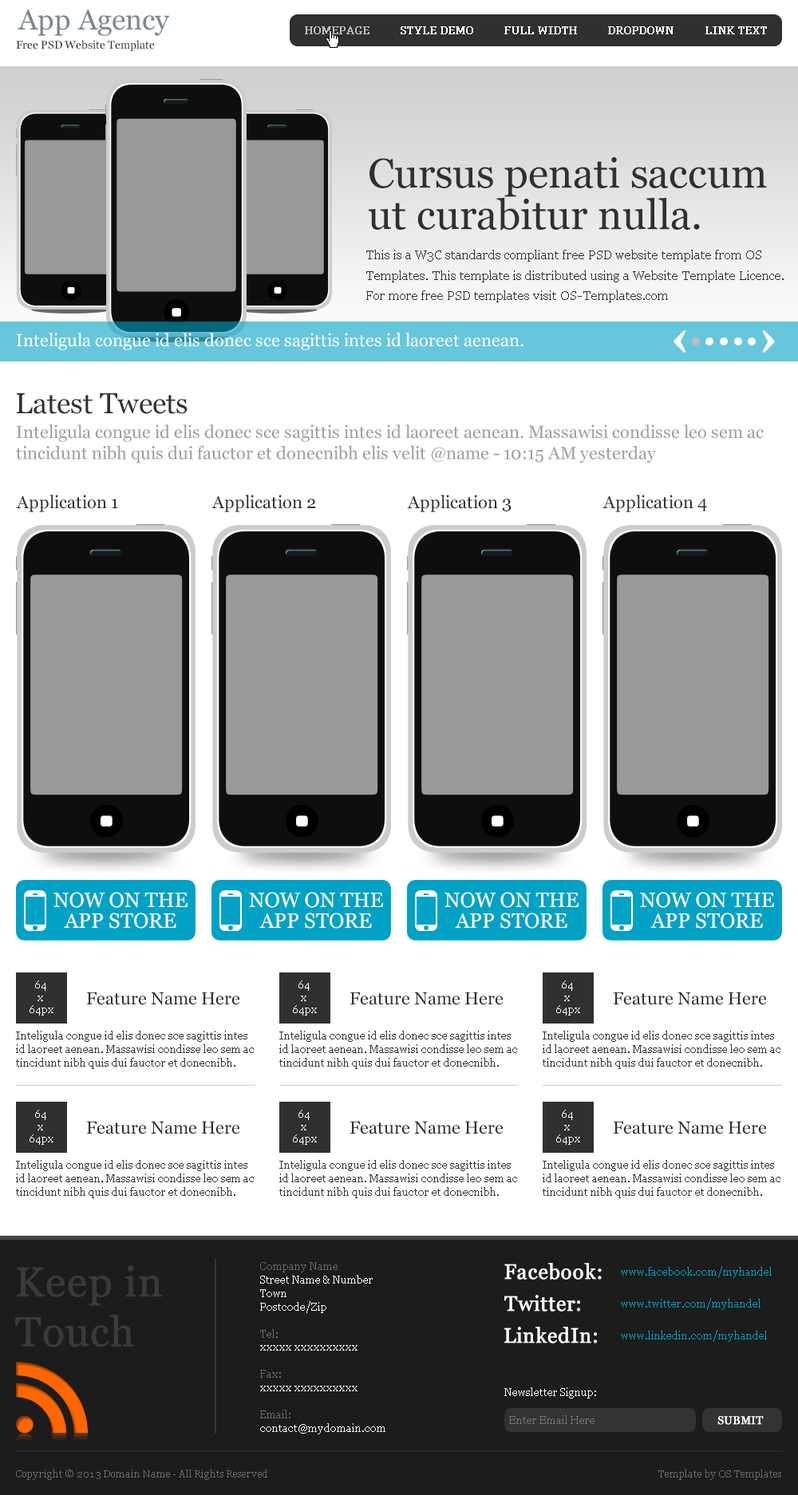
<style>
.page{position:relative;width:798px;height:1495px;background:#ffffff}
.page>*{position:absolute;margin:0}
.t1{font:28.7px "Georgia";color:#7a888d}
.t2{font:10.4px "Georgia";color:#bdbdbf;font-weight:bold}
.t3{font:10.4px "Georgia";color:#ffffff;font-weight:bold}
.t4{font:11.2px "Georgia";color:#303030}
.t5{font:41.5px/41.5px "Georgia";color:#303030}
.t6{font:12.8px/20.4px "Georgia";color:#303030}
.t7{font:17.5px "Georgia";color:#ffffff}
.t8{font:28.7px "Georgia";color:#303030}
.t9{font:17.5px/21.1px "Georgia";color:#9e9e9e}
.t10{font:17.5px "Georgia";color:#303030}
.t11{font:20.7px/20.7px "Georgia";color:#ffffff}
.t12{font:10.4px/12.4px "Georgia";color:#ffffff}
.t13{font:10.4px/13.5px "Georgia";color:#333333}
.t14{font:41.5px/49.8px "Georgia";color:#3a3a3a;font-weight:bold}
.t15{font:10.4px/13.5px "Georgia";color:#ffffff}
.t16{font:10.4px/13.5px "Georgia";color:#6b6b6b}
.t17{font:20.7px "Georgia";color:#ffffff;font-weight:bold}
.t18{font:10.4px "Georgia";color:#01a2c6}
.t19{font:10.4px "Georgia";color:#ffffff}
.t20{font:11.2px "Georgia";color:#747474}
.t21{font:11.2px "Georgia";color:#ffffff;text-transform:uppercase;font-weight:bold}
.t22{font:9.6px "Georgia";color:#6b6b6b}
</style>
<div class="page">
<p class="t1" style="left:18px;top:10px;width:152px;height:26px">App Agency</p>
<p class="t2" style="left:305px;top:26px;width:64px;height:8px">HOMEPAGE</p>
<p class="t3" style="left:400px;top:26px;width:73px;height:8px">STYLE DEMO</p>
<p class="t3" style="left:504px;top:26px;width:73px;height:8px">FULL WIDTH</p>
<p class="t3" style="left:608px;top:26px;width:65px;height:8px">DROPDOWN</p>
<p class="t3" style="left:705px;top:26px;width:62px;height:8px">LINK TEXT</p>
<p class="t4" style="left:16px;top:40px;width:139px;height:11px">Free PSD Website Template</p>
<p class="t5" style="left:368px;top:157px;width:399px;height:74px">Cursus penati saccum ut curabitur nulla.</p>
<p class="t6" style="left:366px;top:250px;width:417px;height:52px">This is a W3C standards compliant free PSD website template from OS Templates. This template is distributed using a Website Template Licence. For more free PSD templates visit OS-Templates.com</p>
<p class="t7" style="left:16px;top:333px;width:507px;height:17px">Inteligula congue id elis donec sce sagittis intes id laoreet aenean.</p>
<p class="t8" style="left:16px;top:393px;width:171px;height:21px">Latest Tweets</p>
<p class="t9" style="left:16px;top:424px;width:747px;height:39px">Inteligula congue id elis donec sce sagittis intes id laoreet aenean. Massawisi condisse leo sem ac <br>tincidunt nibh quis dui fauctor et donecnibh elis velit @name - 10:15 AM yesterday</p>
<p class="t10" style="left:16px;top:495px;width:102px;height:17px">Application 1</p>
<p class="t10" style="left:211px;top:495px;width:105px;height:17px">Application 2</p>
<p class="t10" style="left:407px;top:495px;width:104px;height:17px">Application 3</p>
<p class="t10" style="left:602px;top:495px;width:105px;height:17px">Application 4</p>
<p class="t11" style="left:53px;top:892px;width:134px;height:37px;text-align:center">NOW ON THE<br>APP STORE</p>
<p class="t11" style="left:249px;top:892px;width:134px;height:37px;text-align:center">NOW ON THE<br>APP STORE</p>
<p class="t11" style="left:444px;top:892px;width:134px;height:37px;text-align:center">NOW ON THE<br>APP STORE</p>
<p class="t11" style="left:640px;top:892px;width:134px;height:37px;text-align:center">NOW ON THE<br>APP STORE</p>
<p class="t12" style="left:30px;top:980px;width:23px;height:35px;text-align:center">64 <br>x <br>64px</p>
<p class="t12" style="left:293px;top:980px;width:24px;height:35px;text-align:center">64 <br>x <br>64px</p>
<p class="t12" style="left:556px;top:980px;width:24px;height:35px;text-align:center">64 <br>x <br>64px</p>
<p class="t10" style="left:86px;top:992px;width:154px;height:13px">Feature Name Here</p>
<p class="t10" style="left:349px;top:992px;width:154px;height:13px">Feature Name Here</p>
<p class="t10" style="left:613px;top:992px;width:154px;height:13px">Feature Name Here</p>
<p class="t13" style="left:16px;top:1031px;width:238px;height:38px">Inteligula congue id elis donec sce sagittis intes<br>id laoreet aenean. Massawisi condisse leo sem ac <br>tincidunt nibh quis dui fauctor et donecnibh.</p>
<p class="t13" style="left:279px;top:1031px;width:238px;height:38px">Inteligula congue id elis donec sce sagittis intes<br>id laoreet aenean. Massawisi condisse leo sem ac <br>tincidunt nibh quis dui fauctor et donecnibh.</p>
<p class="t13" style="left:542px;top:1031px;width:238px;height:38px">Inteligula congue id elis donec sce sagittis intes<br>id laoreet aenean. Massawisi condisse leo sem ac <br>tincidunt nibh quis dui fauctor et donecnibh.</p>
<p class="t12" style="left:30px;top:1110px;width:23px;height:35px;text-align:center">64 <br>x <br>64px</p>
<p class="t12" style="left:293px;top:1110px;width:24px;height:35px;text-align:center">64 <br>x <br>64px</p>
<p class="t12" style="left:556px;top:1110px;width:24px;height:35px;text-align:center">64 <br>x <br>64px</p>
<p class="t10" style="left:86px;top:1121px;width:154px;height:13px">Feature Name Here</p>
<p class="t10" style="left:349px;top:1121px;width:154px;height:13px">Feature Name Here</p>
<p class="t10" style="left:613px;top:1121px;width:154px;height:13px">Feature Name Here</p>
<p class="t13" style="left:16px;top:1160px;width:238px;height:38px">Inteligula congue id elis donec sce sagittis intes<br>id laoreet aenean. Massawisi condisse leo sem ac <br>tincidunt nibh quis dui fauctor et donecnibh.</p>
<p class="t13" style="left:279px;top:1160px;width:238px;height:38px">Inteligula congue id elis donec sce sagittis intes<br>id laoreet aenean. Massawisi condisse leo sem ac <br>tincidunt nibh quis dui fauctor et donecnibh.</p>
<p class="t13" style="left:542px;top:1160px;width:238px;height:38px">Inteligula congue id elis donec sce sagittis intes<br>id laoreet aenean. Massawisi condisse leo sem ac <br>tincidunt nibh quis dui fauctor et donecnibh.</p>
<p class="t14" style="left:15px;top:1265px;width:147px;height:82px">Keep in <br>Touch</p>
<p class="t15" style="left:260px;top:1262px;width:125px;height:172px"><span class="t16">Company Name<br></span>Street Name &amp; Number<br>Town<br>Postcode/Zip<br><br><span class="t16">Tel:<br></span>xxxxx xxxxxxxxxx<br><br><span class="t16">Fax:<br></span>xxxxx xxxxxxxxxx<br><br><span class="t16">Email:<br></span>contact@mydomain.com</p>
<p class="t17" style="left:504px;top:1263px;width:97px;height:16px">Facebook:</p>
<p class="t18" style="left:621px;top:1266px;width:150px;height:12px">www.facebook.com/myhandel</p>
<p class="t17" style="left:504px;top:1295px;width:76px;height:16px">Twitter:</p>
<p class="t18" style="left:621px;top:1298px;width:139px;height:12px">www.twitter.com/myhandel</p>
<p class="t17" style="left:504px;top:1327px;width:93px;height:16px">LinkedIn:</p>
<p class="t18" style="left:621px;top:1330px;width:146px;height:12px">www.linkedin.com/myhandel</p>
<p class="t19" style="left:504px;top:1387px;width:92px;height:11px">Newsletter Signup:</p>
<p class="t20" style="left:509px;top:1415px;width:85px;height:9px">Enter Email Here</p>
<p class="t21" style="left:717px;top:1416px;width:46px;height:9px">SUBMIT</p>
<p class="t22" style="left:16px;top:1469px;width:251px;height:11px">Copyright © 2013 Domain Name - All Rights Reserved</p>
<p class="t22" style="left:658px;top:1469px;width:123px;height:11px">Template by OS Templates</p>
</div>
